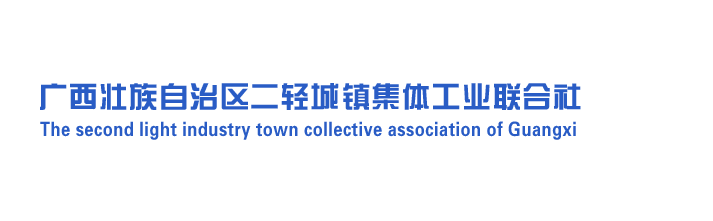
<style>
.page{position:relative;width:713px;height:221px;background:#ffffff}
.page>*{position:absolute;margin:0}
.t1{font:29.5px "FZZYJW--GB1-0";letter-spacing:0.025em;color:#295cc5}
.t2{font:19.7px "FZZYJW--GB1-0";letter-spacing:0.025em;color:#295cc5;scale:0.84 1}
</style>
<div class="page">
<p class="t1" style="left:40px;top:83px;width:541px;height:27px">广西壮族自治区二轻城镇集体工业联合社</p>
<p class="t2" style="left:40px;top:121px;width:536px;height:19px">The second light industry town collective association of Guangxi</p>
</div>
